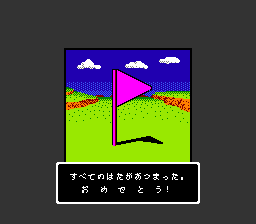
<style>
.page{position:relative;width:256px;height:224px;background:#333333}
.page>*{position:absolute;margin:0}
.t1{font:8px "PixelMplus12-Regular";letter-spacing:0.15em;color:#ffffff}
</style>
<div class="page">
<p class="t1" style="left:70px;top:173px;width:113px;height:7px">すべてのはたがあつまった。</p>
<p class="t1" style="left:82px;top:186px;width:86px;height:7px">お　め　で　と　う！</p>
</div>
